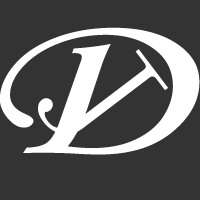
<style>
.page{position:relative;width:200px;height:200px;background:#333333}
.page>*{position:absolute;margin:0}
.t1{font:366.5px "STLiti";letter-spacing:0.2em;color:#ffffff;text-transform:uppercase;scale:1.37 1}
.t2{font:258.5px "NSimSun";letter-spacing:0.2em;color:#ffffff;text-transform:uppercase}
</style>
<div class="page">
<p class="t1" style="left:0px;top:27px;width:200px;height:128px">D</p>
<p class="t2" style="left:38px;top:49px;width:130px;height:86px;rotate:53deg">J</p>
</div>
